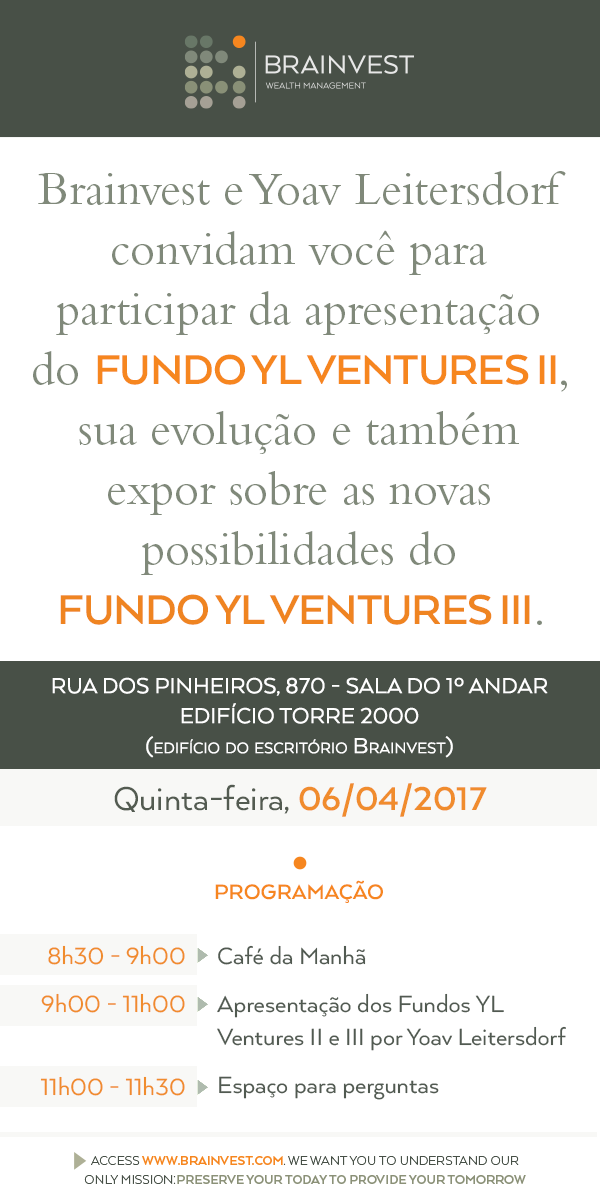
<style>
.page{position:relative;width:600px;height:1200px;background:#ffffff}
.page>*{position:absolute;margin:0}
.t1{font:48px/60px "BemboStd";color:#808979}
.t2{font:48px/60px "ArquitectaBold";letter-spacing:-0.025em;color:#f6861f;text-transform:uppercase}
.t3{font:48px/60px "ArquitectaBold";letter-spacing:-0.025em;color:#ef8421;text-transform:uppercase}
.t4{font:25px "Arquitecta";color:#ffffff;text-transform:uppercase}
.t5{font:25px "Arquitecta";color:#ffffff;font-variant:small-caps}
.t6{font:38px "Arquitecta";color:#475047}
.t7{font:38px "ArquitectaBold";color:#f6861f}
.t8{font:24px "ArquitectaBold";color:#f6861f;text-transform:uppercase}
.t9{font:27px/48px "Arquitecta";color:#f6861f}
.t10{font:27px "Arquitecta";color:#515a51}
</style>
<div class="page">
<p class="t1" style="left:33px;top:171px;width:534px;height:454px;text-align:center">Brainvest e Yoav Leitersdorf convidam você para participar da apresentação do <span class="t2">Fundo YL Ventures II</span>, sua evolução e também expor sobre as novas possibilidades do <br><span class="t3">Fundo YL Ventures III</span>.</p>
<p class="t4" style="left:52px;top:677px;width:496px;height:81px;text-align:center">Rua dos Pinheiros, 870 - Sala do 1º andar <br>Edifício Torre 2000 <br><span class="t5">(edifício do escritório Brainvest)</span></p>
<p class="t6" style="left:114px;top:783px;width:373px;height:34px">Quinta-feira, <span class="t7">06/04/2017</span></p>
<p class="t8" style="left:215px;top:880px;width:168px;height:23px">Programação</p>
<p class="t9" style="left:40px;top:945px;width:145px;height:151px;text-align:right">8h30 - 9h00<br>9h00 - 11h00<br><br>11h00 - 11h30</p>
<p class="t10" style="left:217px;top:945px;width:349px;height:155px">Café da Manhã<br><br>Apresentação dos Fundos YL Ventures II e III por Yoav Leitersdorf<br><br>Espaço para perguntas</p>
</div>
